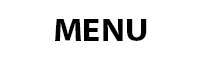
<style>
.page{position:relative;width:200px;height:60px;background:#ffffff}
.page>*{position:absolute;margin:0}
.t1{font:31.5px "MyriadPro-Bold";color:#000000;scale:1.11 1}
</style>
<div class="page">
<p class="t1" style="left:55px;top:19px;width:92px;height:22px">MENU</p>
</div>
